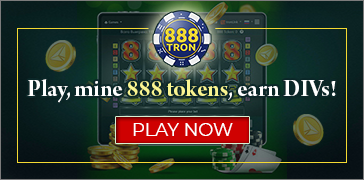
<style>
.page{position:relative;width:364px;height:180px}
.page>*{position:absolute;margin:0}
.t1{font:25px "ArnoPro-BoldDisplay";color:#ffffff}
.t2{font:25px "ArnoPro-BoldDisplay";color:#f9f591}
.t3{font:17.8px "Montserrat-Regular";color:#ffffff;text-transform:uppercase}
</style>
<div class="page">
<p class="t1" style="left:27px;top:79px;width:309px;height:24px">Play, mine <span class="t2">888 tokens</span>, earn DIVs!</p>
<p class="t3" style="left:133px;top:123px;width:100px;height:13px">play now</p>
</div>
